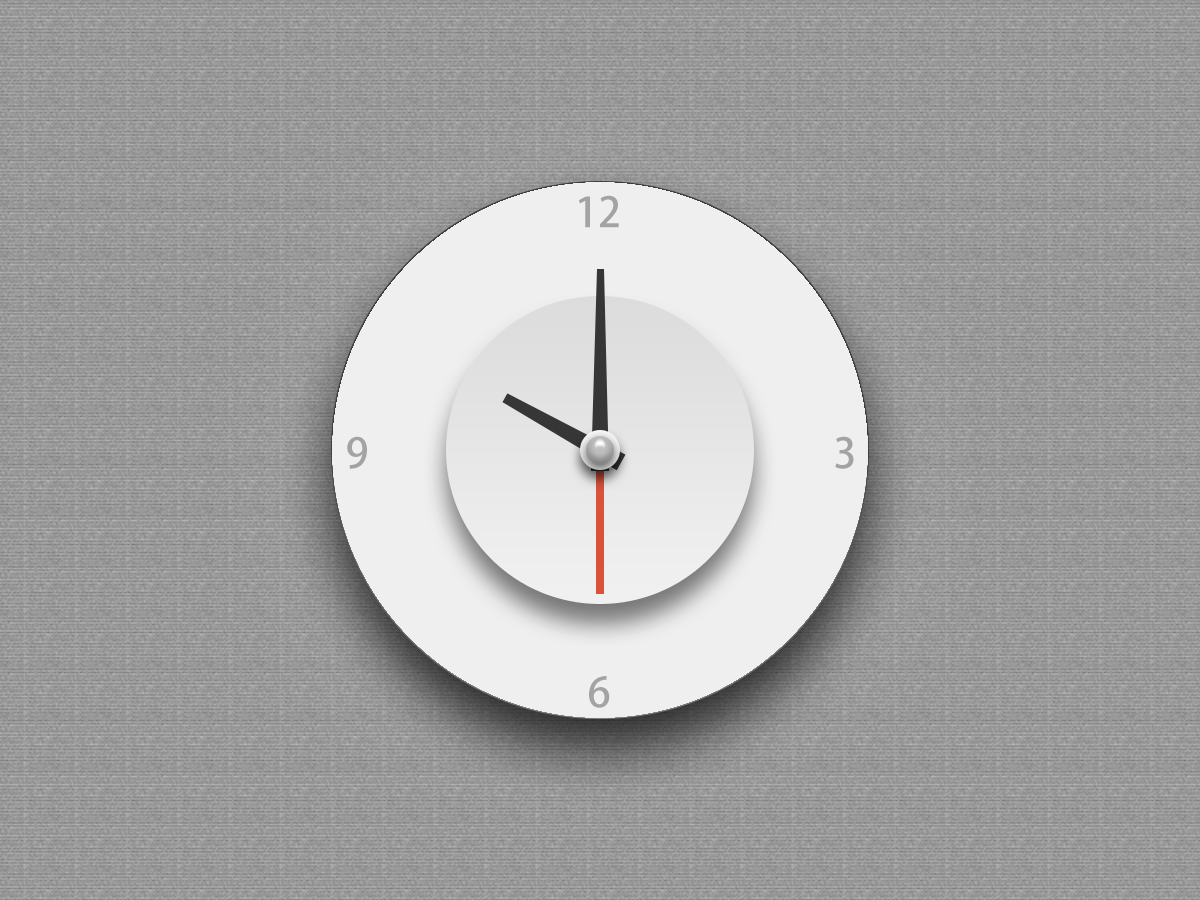
<style>
.page{position:relative;width:1200px;height:900px}
.page>*{position:absolute;margin:0}
.t1{font:41px "AdobeHeitiStd-Regular";color:#a3a3a3;text-transform:uppercase}
</style>
<div class="page">
<p class="t1" style="left:579px;top:195px;width:40px;height:33px">12</p>
<p class="t1" style="left:347px;top:436px;width:20px;height:33px">9</p>
<p class="t1" style="left:835px;top:436px;width:19px;height:33px">3</p>
<p class="t1" style="left:589px;top:676px;width:21px;height:32px">6</p>
</div>
